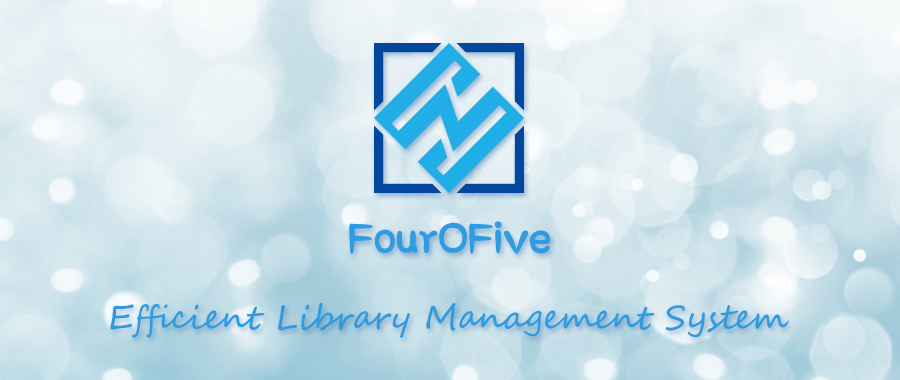
<style>
.page{position:relative;width:900px;height:380px}
.page>*{position:absolute;margin:0}
.t1{font:33.3px "SegoeScript";color:#2f9be0}
</style>
<div class="page">
<p class="t1" style="left:110px;top:302px;width:679px;height:36px">Efficient Library Management System</p>
</div>
